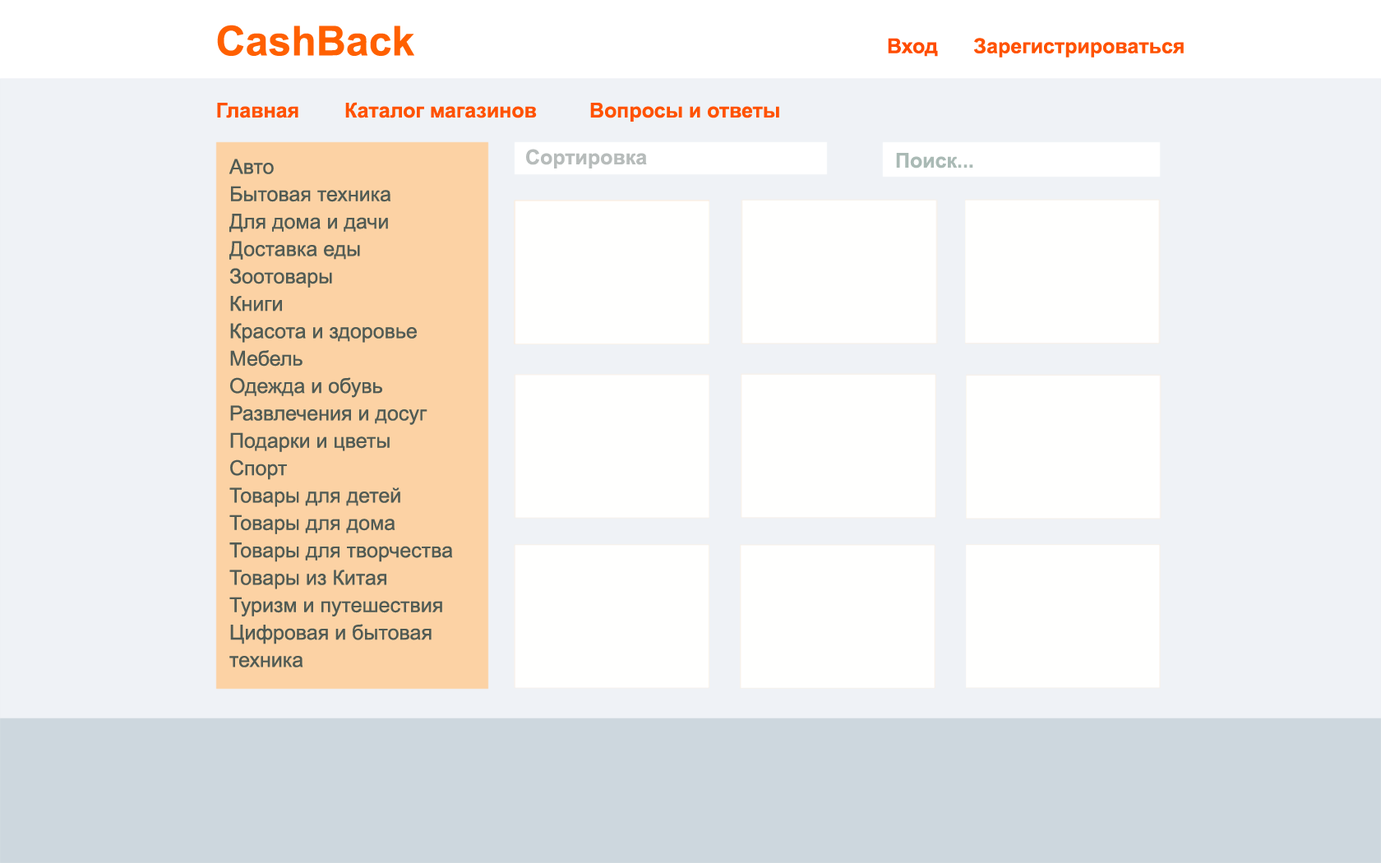
<style>
.page{position:relative;width:1381px;height:863px;background:#eff2f6}
.page>*{position:absolute;margin:0}
.t1{font:41.1px "Arial-BoldMT";color:#ff6000}
.t2{font:20.6px "Arial-BoldMT";color:#ff4c00}
.t3{font:20.6px "Arial-BoldMT";color:#ff5200}
.t4{font:20.6px "Arial-BoldMT";color:#b7bcbb}
.t5{font:20.6px/27.4px "ArialMT";color:#515c54}
.t6{font:20.6px "Arial-BoldMT";color:#aabab5}
</style>
<div class="page">
<p class="t1" style="left:217px;top:25px;width:197px;height:31px">CashBack</p>
<p class="t2" style="left:888px;top:38px;width:50px;height:19px">Вход</p>
<p class="t3" style="left:974px;top:38px;width:210px;height:20px">Зарегистрироваться</p>
<p class="t3" style="left:345px;top:102px;width:192px;height:16px">Каталог магазинов</p>
<p class="t3" style="left:217px;top:103px;width:81px;height:15px">Главная</p>
<p class="t3" style="left:590px;top:103px;width:189px;height:19px">Вопросы и ответы</p>
<p class="t4" style="left:526px;top:149px;width:121px;height:20px">Сортировка</p>
<p class="t5" style="left:229px;top:159px;width:224px;height:509px">Авто<br>Бытовая техника<br>Для дома и дачи<br>Доставка еды<br>Зоотовары<br>Книги<br>Красота и здоровье<br>Мебель <br>Одежда и обувь<br>Развлечения и досуг<br>Подарки и цветы<br>Спорт<br>Товары для детей<br>Товары для дома<br>Товары для творчества<br>Товары из Китая<br>Туризм и путешествия<br>Цифровая и бытовая техника</p>
<p class="t6" style="left:896px;top:153px;width:77px;height:16px">Поиск...</p>
</div>
